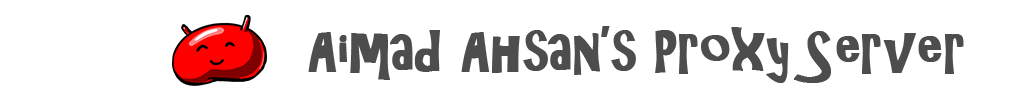
<style>
.page{position:relative;width:1024px;height:100px;background:#ffffff}
.page>*{position:absolute;margin:0}
.t1{font:55px "ARCHRISTY";color:#4e4d4d;font-weight:bold}
</style>
<div class="page">
<p class="t1" style="left:308px;top:26px;width:656px;height:57px">Aimad Ahsan’s Proxy Server</p>
</div>
